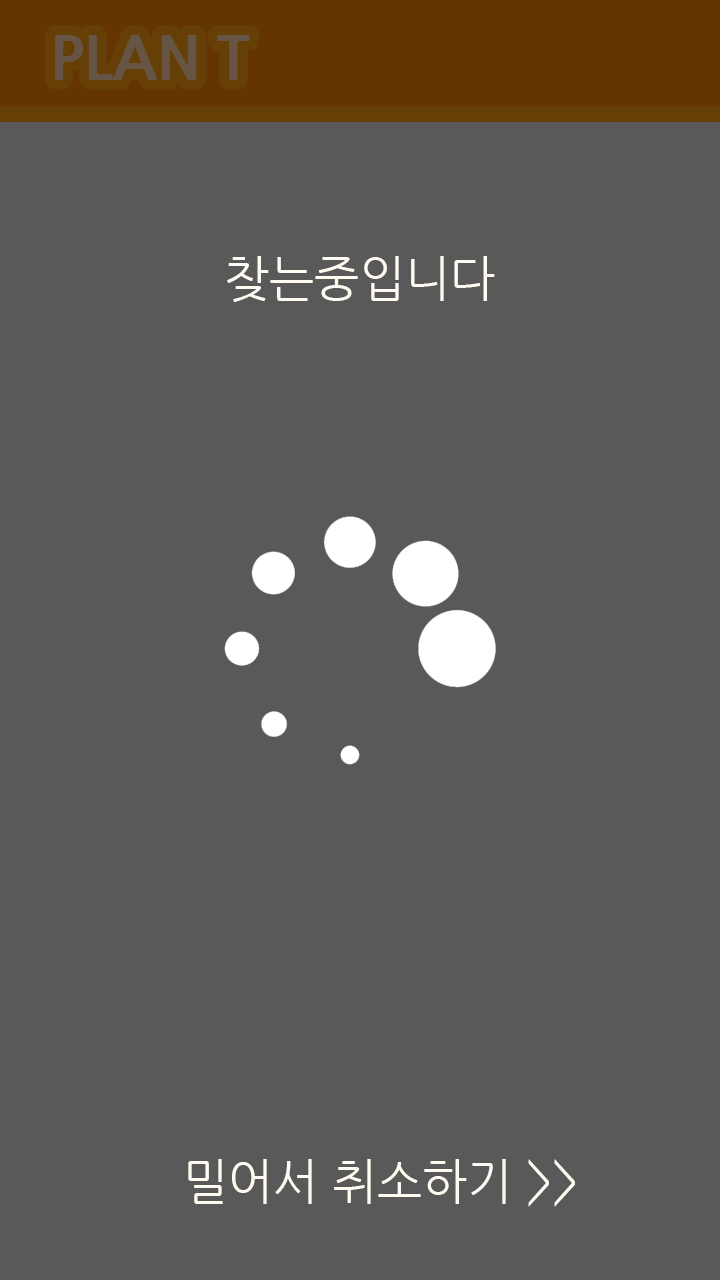
<style>
.page{position:relative;width:720px;height:1280px;background:#595959}
.page>*{position:absolute;margin:0}
.t1{font:60px "NanumGothicExtraBold";color:#665545}
.t2{font:48px "NanumGothic";color:#fffaf2}
</style>
<div class="page">
<p class="t1" style="left:55px;top:35px;width:195px;height:45px">PLAN T</p>
<p class="t2" style="left:227px;top:256px;width:268px;height:46px">찾는중입니다</p>
<p class="t2" style="left:188px;top:1159px;width:387px;height:48px">밀어서 취소하기 &gt;&gt;</p>
</div>
